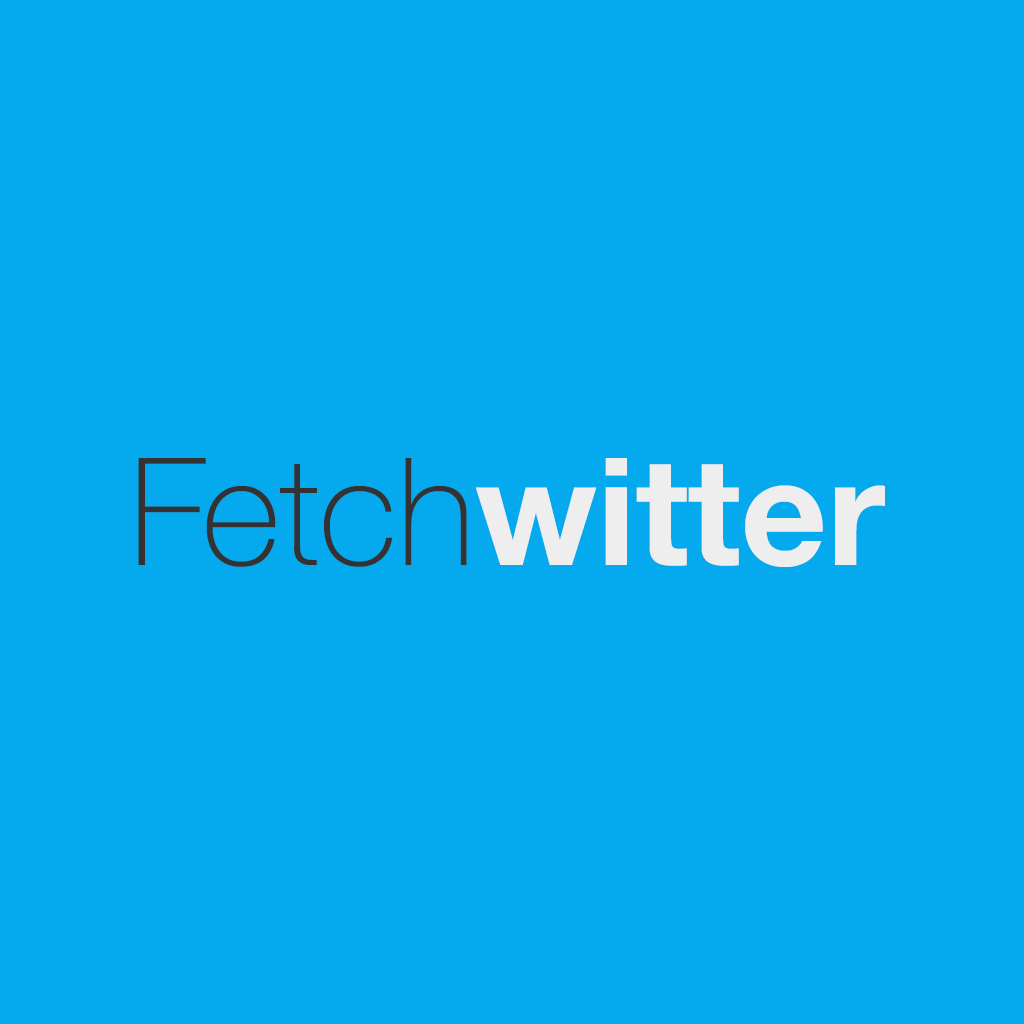
<style>
.page{position:relative;width:1024px;height:1024px;background:#05aaee}
.page>*{position:absolute;margin:0}
.t1{font:150px "HelveticaNeue-Bold";color:#eeeeee}
.t2{font:150px "HelveticaNeue-Thin";color:#333333}
</style>
<div class="page">
<p class="t1" style="left:138px;top:458px;width:747px;height:109px"><span class="t2">Fetch</span>witter</p>
</div>
